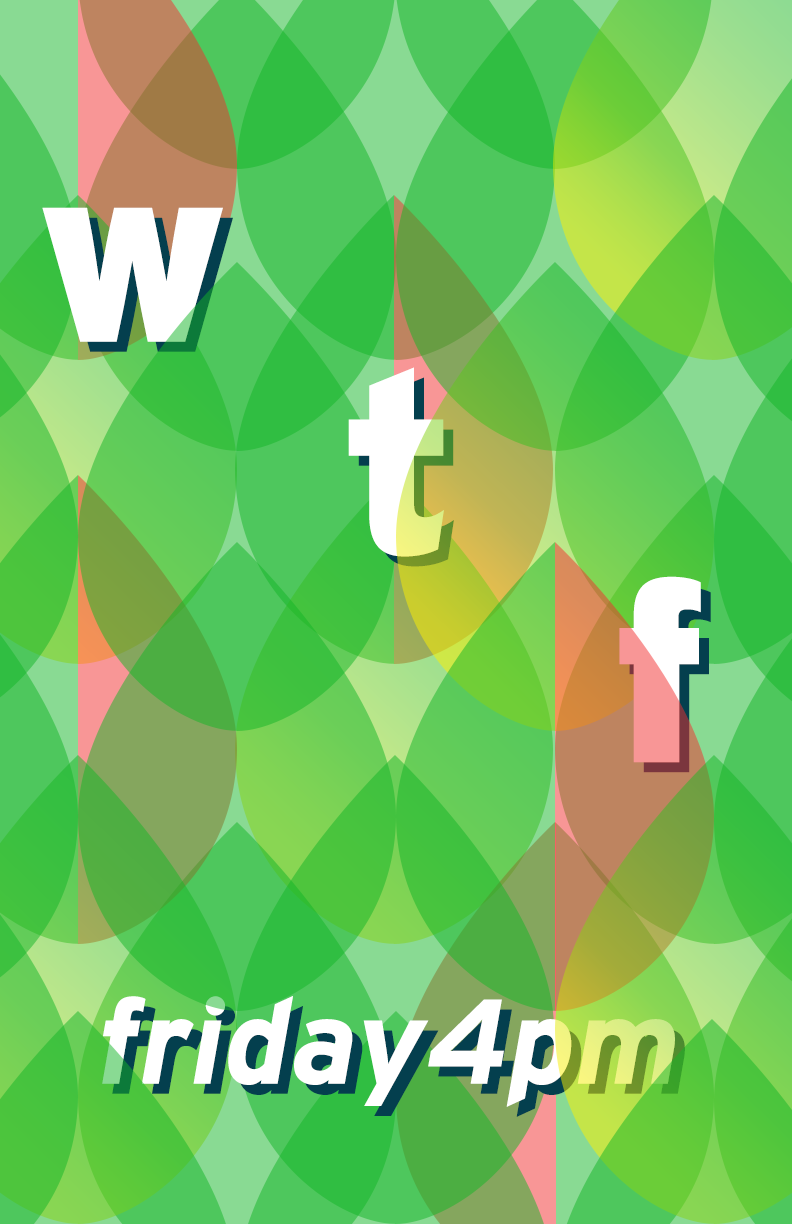
<style>
.page{position:relative;width:792px;height:1224px}
.page>*{position:absolute;margin:0}
.t1{font:255px "Interstate-Black";color:#ffffff}
.t2{font:255px "Interstate-Black"}
.t3{font:120px "Interstate-BoldItalic";color:#ffffff}
.t4{font:120px "Interstate-BoldItalic"}
</style>
<div class="page">
<p class="t1" style="left:42px;top:207px;width:181px;height:135px">w</p>
<p class="t1" style="left:52px;top:217px;width:181px;height:135px">w</p>
<p class="t1" style="left:348px;top:367px;width:96px;height:190px">t</p>
<p class="t2" style="left:619px;top:576px;width:82px;height:187px">f</p>
<p class="t3" style="left:102px;top:996px;width:573px;height:111px">friday4pm</p>
<p class="t4" style="left:112px;top:1006px;width:573px;height:111px">friday4pm</p>
</div>
